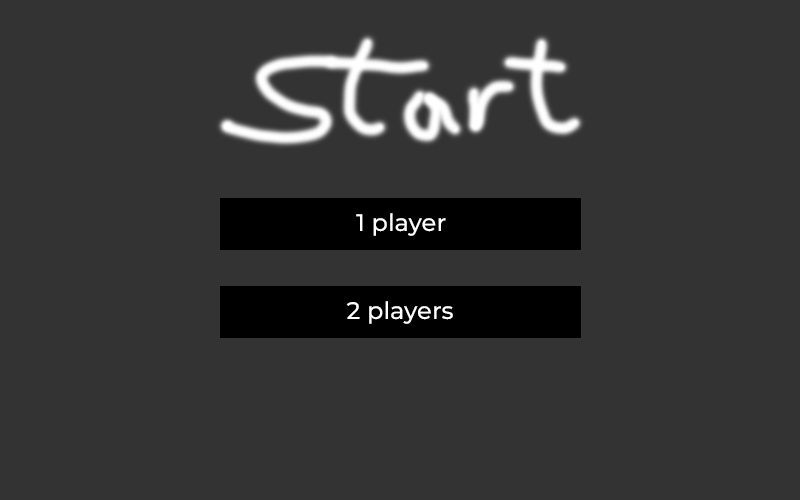
<style>
.page{position:relative;width:800px;height:500px;background:#333333}
.page>*{position:absolute;margin:0}
.t1{font:24px "Montserrat-Medium";color:#ffffff}
</style>
<div class="page">
<p class="t1" style="left:356px;top:213px;width:90px;height:23px">1 player</p>
<p class="t1" style="left:346px;top:301px;width:107px;height:23px">2 players</p>
</div>
